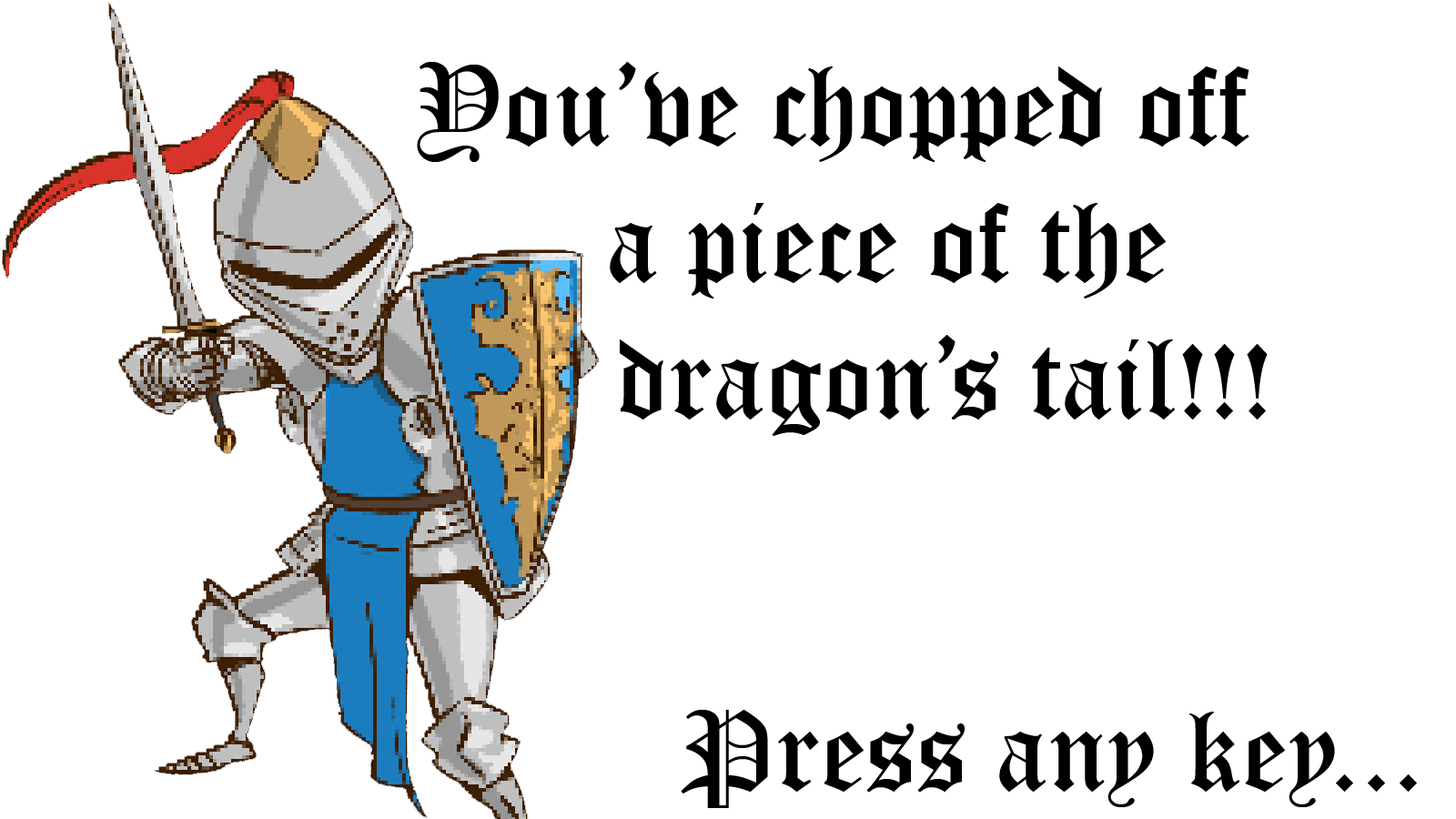
<style>
.page{position:relative;width:1456px;height:819px;background:#ffffff}
.page>*{position:absolute;margin:0}
.t1{font:113.7px "OldEnglishTextMT";color:#000000}
</style>
<div class="page">
<p class="t1" style="left:417px;top:62px;width:851px;height:374px">You’ve chopped off<br>      a piece of the<br>       dragon’s tail!!!</p>
<p class="t1" style="left:681px;top:710px;width:736px;height:98px">Press any key...</p>
</div>
